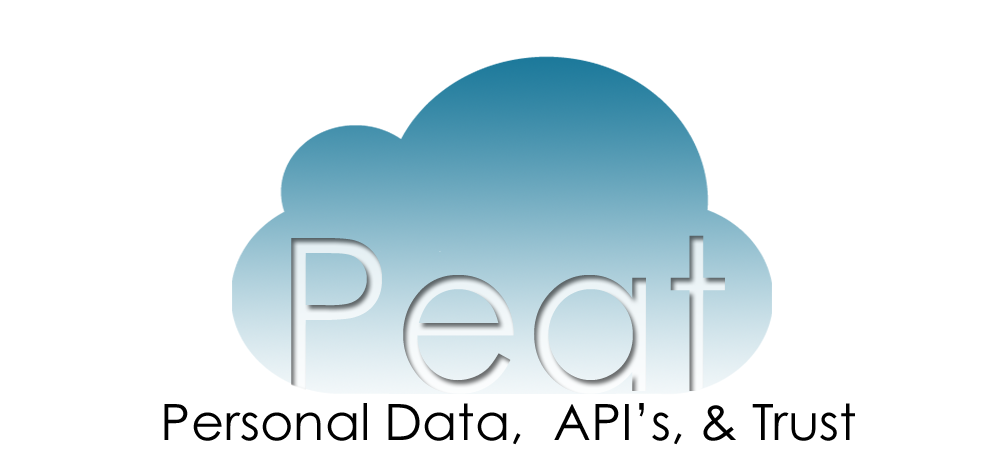
<style>
.page{position:relative;width:1000px;height:454px;background:#ffffff}
.page>*{position:absolute;margin:0}
.t1{font:50.4px "CenturyGothic";color:#000000}
</style>
<div class="page">
<p class="t1" style="left:164px;top:403px;width:691px;height:42px">Personal Data,  API’s, &amp; Trust</p>
</div>
